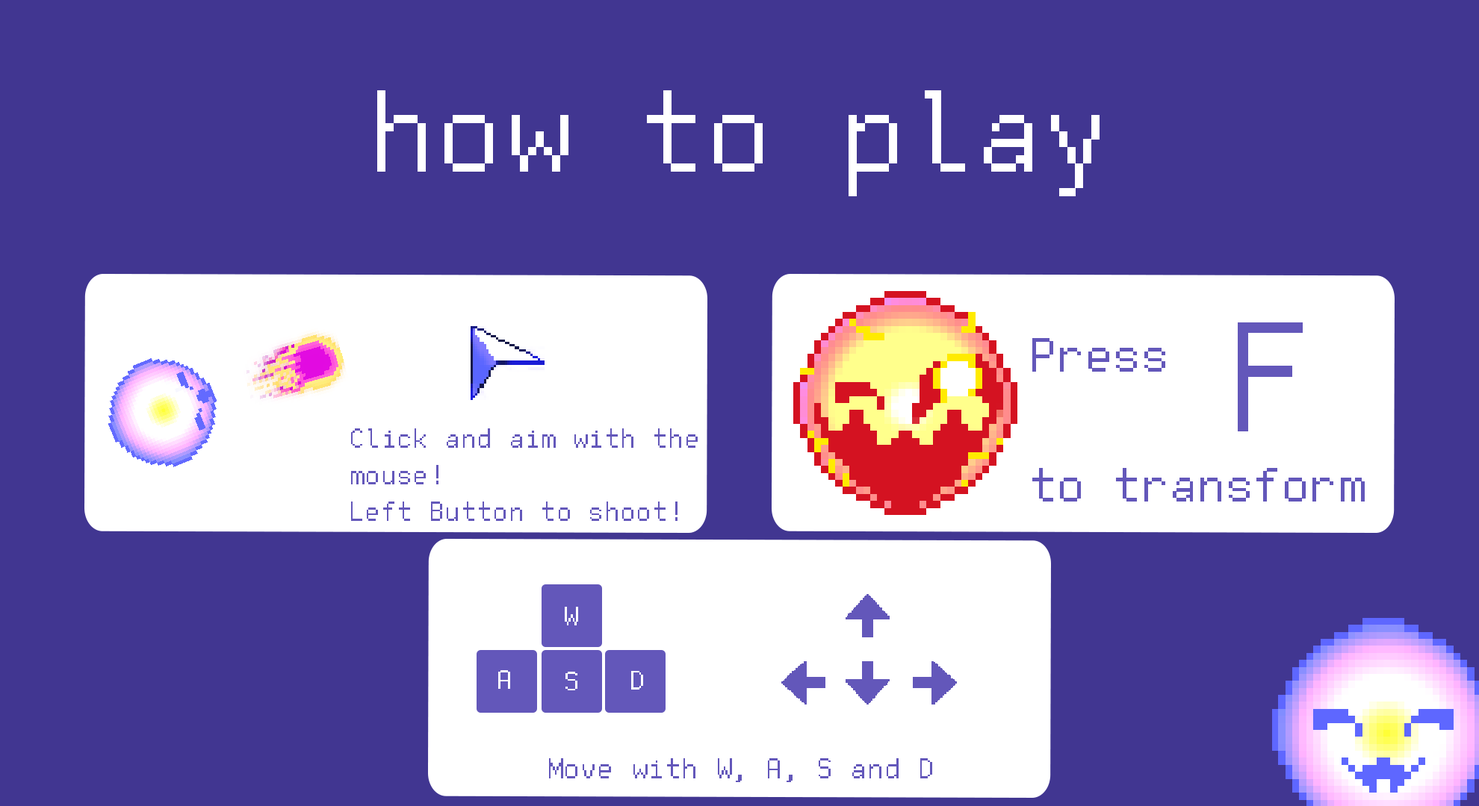
<style>
.page{position:relative;width:1479px;height:806px;background:#413691}
.page>*{position:absolute;margin:0}
.t1{font:129.6px "FreePixel-Regular";color:#ffffff}
.t2{font:174.4px "FreePixel-Regular";color:#6357ba}
.t3{font:53.9px "FreePixel-Regular";color:#6357ba}
.t4{font:30.7px "FreePixel-Regular";color:#6357ba}
.t5{font:29.7px "FreePixel-Regular";color:#ffffff}
.t6{font:32.4px "FreePixel-Regular";color:#6357ba}
</style>
<div class="page">
<p class="t1" style="left:377px;top:90px;width:722px;height:106px">how to play</p>
<p class="t2" style="left:1237px;top:323px;width:65px;height:109px">F</p>
<p class="t3" style="left:1032px;top:338px;width:332px;height:164px">Press<br><br>to transform</p>
<p class="t4" style="left:351px;top:429px;width:346px;height:92px">Click and aim with the<br>mouse!<br>Left Button to shoot!</p>
<p class="t5" style="left:565px;top:607px;width:13px;height:19px">W</p>
<p class="t5" style="left:498px;top:671px;width:12px;height:18px">A</p>
<p class="t5" style="left:565px;top:672px;width:12px;height:19px">S</p>
<p class="t5" style="left:631px;top:671px;width:12px;height:19px">D</p>
<p class="t6" style="left:549px;top:759px;width:383px;height:24px">Move with W, A, S and D</p>
</div>
